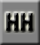
<style>
.page{position:relative;width:40px;height:45px;background:#808080}
.page>*{position:absolute;margin:0}
.t1{font:24px "GothicXB-HM"}
</style>
<div class="page">
<p class="t1" style="left:6px;top:13px;width:27px;height:18px">HH</p>
</div>
